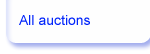
<style>
.page{position:relative;width:150px;height:54px;background:#fefefe}
.page>*{position:absolute;margin:0}
.t1{font:14px "ArialMT";color:#0326fb}
</style>
<div class="page">
<p class="t1" style="left:19px;top:15px;width:71px;height:10px">All auctions</p>
</div>
